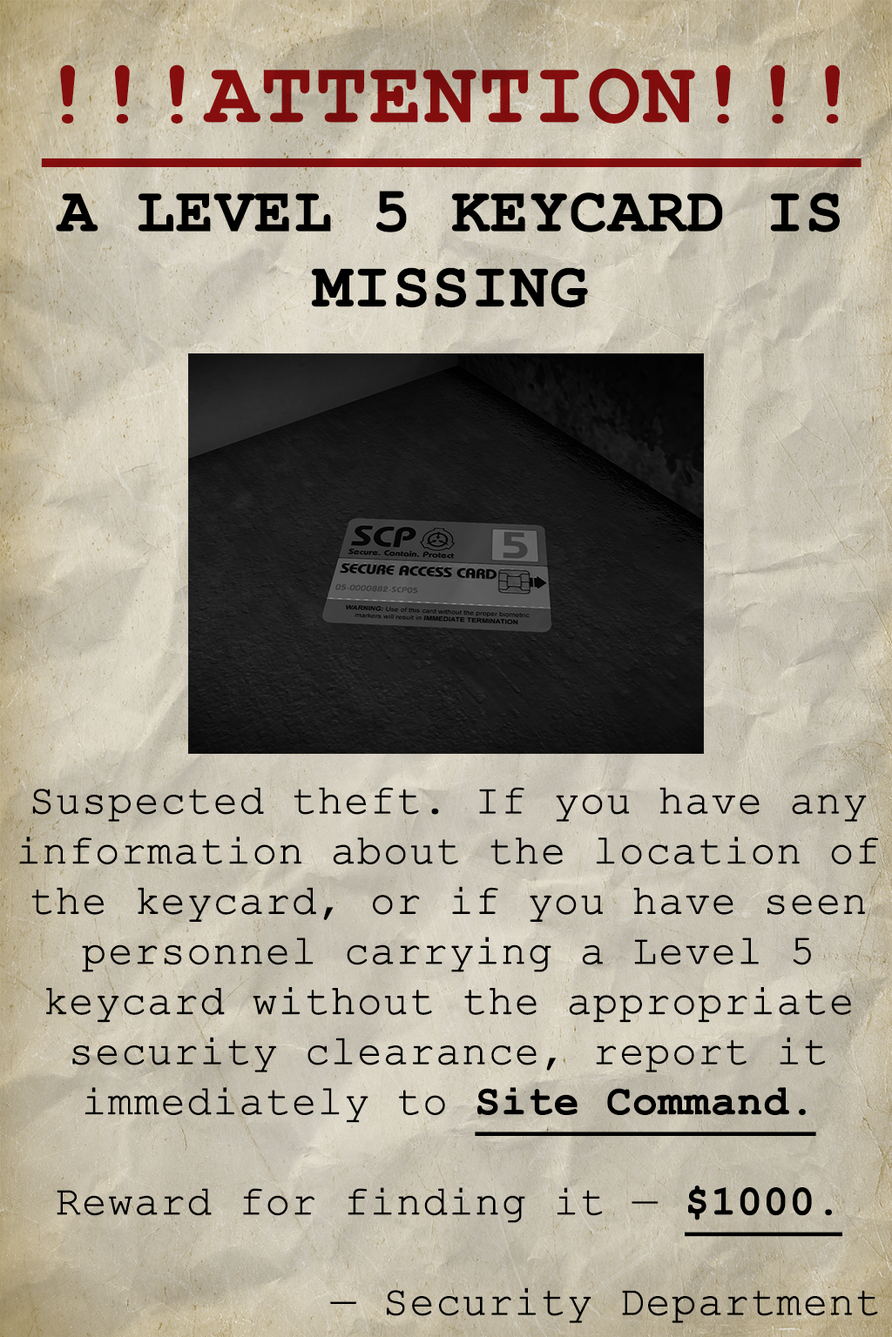
<style>
.page{position:relative;width:892px;height:1337px}
.page>*{position:absolute;margin:0}
.t1{font:87.1px "CourierNewPS-BoldMT";color:#8f0f0f;text-transform:uppercase;font-weight:bold;text-decoration:underline}
.t2{font:62.7px "CourierNewPS-BoldMT";color:#000000;text-transform:uppercase;font-weight:bold}
.t3{font:41.8px "CourierNewPSMT";color:#000000;font-weight:bold}
.t4{font:41.8px "CourierNewPS-BoldMT";color:#000000;font-weight:bold;text-decoration:underline}
</style>
<div class="page">
<p class="t1" style="left:41px;top:64px;width:820px;height:103px">!!!ATTENTION!!!</p>
<p class="t2" style="left:56px;top:191px;width:783px;height:117px;text-align:center">A Level 5 keycard is missing</p>
<p class="t3" style="left:19px;top:787px;width:860px;height:536px;text-align:center">Suspected theft. If you have any information about the location of the keycard, or if you have seen personnel carrying a Level 5 keycard without the appropriate security clearance, report it immediately to <span class="t4">Site Command.<br></span><br>Reward for finding it — <span class="t4">$1000.<br></span><br>            — Security Department</p>
</div>
